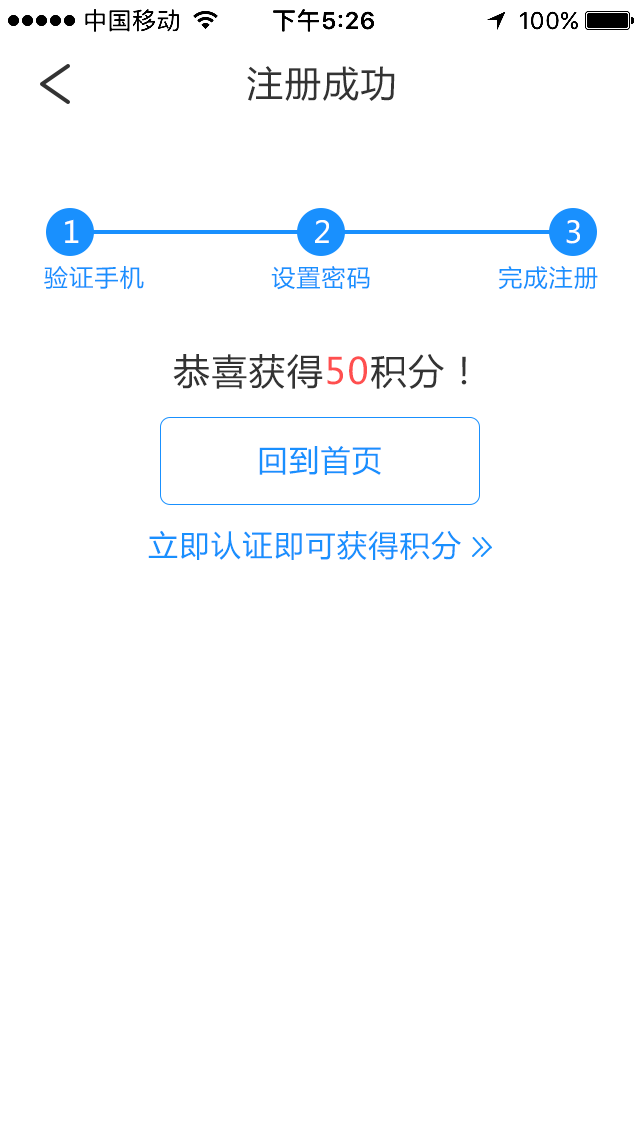
<style>
.page{position:relative;width:640px;height:1136px;background:#ffffff}
.page>*{position:absolute;margin:0}
.t1{font:36px "MicrosoftYaHei";letter-spacing:0.05em;color:#333333}
.t2{font:30.1px "MicrosoftYaHei";letter-spacing:0.05em;color:#ffffff}
.t3{font:24.1px "MicrosoftYaHei";letter-spacing:0.05em;color:#1990fe}
.t4{font:36px "MicrosoftYaHei";letter-spacing:0.05em;color:#ff4f4f}
.t5{font:30px "MicrosoftYaHei";letter-spacing:0.05em;color:#1990fe}
</style>
<div class="page">
<p class="t1" style="left:247px;top:66px;width:148px;height:35px">注册成功</p>
<p class="t2" style="left:65px;top:219px;width:14px;height:24px">1</p>
<p class="t2" style="left:315px;top:220px;width:14px;height:23px">2</p>
<p class="t2" style="left:566px;top:220px;width:14px;height:24px">3</p>
<p class="t3" style="left:44px;top:266px;width:100px;height:24px">验证手机</p>
<p class="t3" style="left:271px;top:266px;width:99px;height:24px">设置密码</p>
<p class="t3" style="left:498px;top:266px;width:100px;height:24px">完成注册</p>
<p class="t1" style="left:173px;top:354px;width:294px;height:35px">恭喜获得<span class="t4">50</span>积分！</p>
<p class="t5" style="left:259px;top:446px;width:122px;height:30px">回到首页</p>
<p class="t5" style="left:148px;top:530px;width:313px;height:30px">立即认证即可获得积分</p>
</div>
